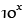
<style>
.page{position:relative;width:24px;height:24px;background:#ffffff}
.page>*{position:absolute;margin:0}
.t1{font:24px "Gabriola";color:#000000}
</style>
<div class="page">
<p class="t1" style="left:1px;top:5px;width:21px;height:13px">10x</p>
</div>
